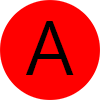
<style>
.page{position:relative;width:100px;height:100px;background:#ff0000}
.page>*{position:absolute;margin:0}
.t1{font:75px "MalgunGothicRegular";color:#000000}
</style>
<div class="page">
<p class="t1" style="left:26px;top:21px;width:48px;height:54px">A</p>
</div>
